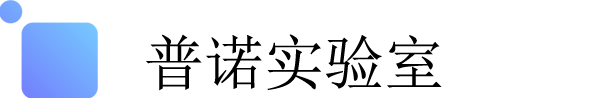
<style>
.page{position:relative;width:600px;height:98px;background:#ffffff}
.page>*{position:absolute;margin:0}
.t1{font:60px "NSimSun";color:#000000}
</style>
<div class="page">
<p class="t1" style="left:146px;top:34px;width:296px;height:57px">普诺实验室</p>
</div>
